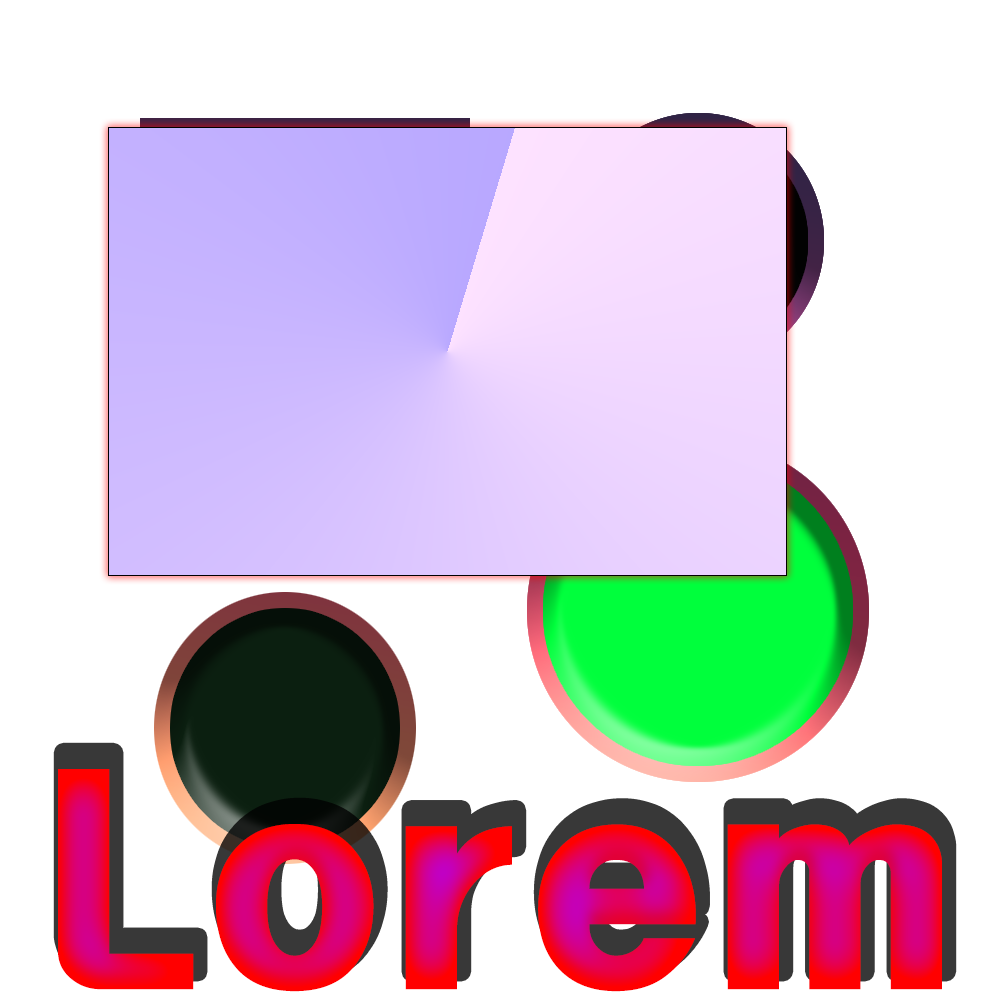
<style>
.page{position:relative;width:1000px;height:1000px;background:#ffffff}
.page>*{position:absolute;margin:0}
.t1{font:251.5px "HeadlineR-HM"}
</style>
<div class="page">
<p class="t1" style="left:58px;top:769px;width:884px;height:223px">Lorem</p>
</div>
